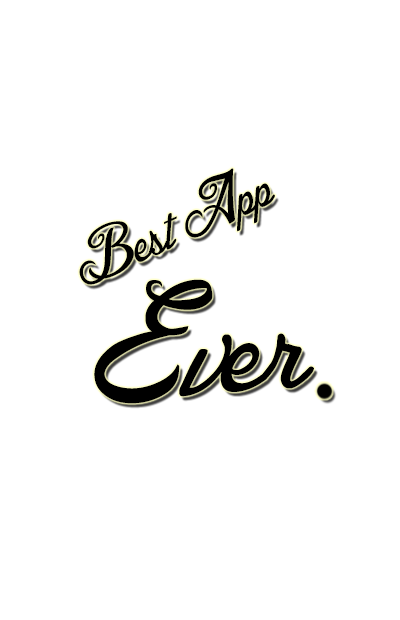
<style>
.page{position:relative;width:400px;height:620px;background:#ffffff}
.page>*{position:absolute;margin:0}
.t1{font:89.4px "BlessedDay";color:#000000;scale:0.89 1}
.t2{font:200px "BlessedDay";color:#000000}
</style>
<div class="page">
<p class="t1" style="left:79px;top:168px;width:196px;height:117px;rotate:-24deg">Best App</p>
<p class="t2" style="left:94px;top:279px;width:220px;height:125px;rotate:-5deg">Ever</p>
</div>
